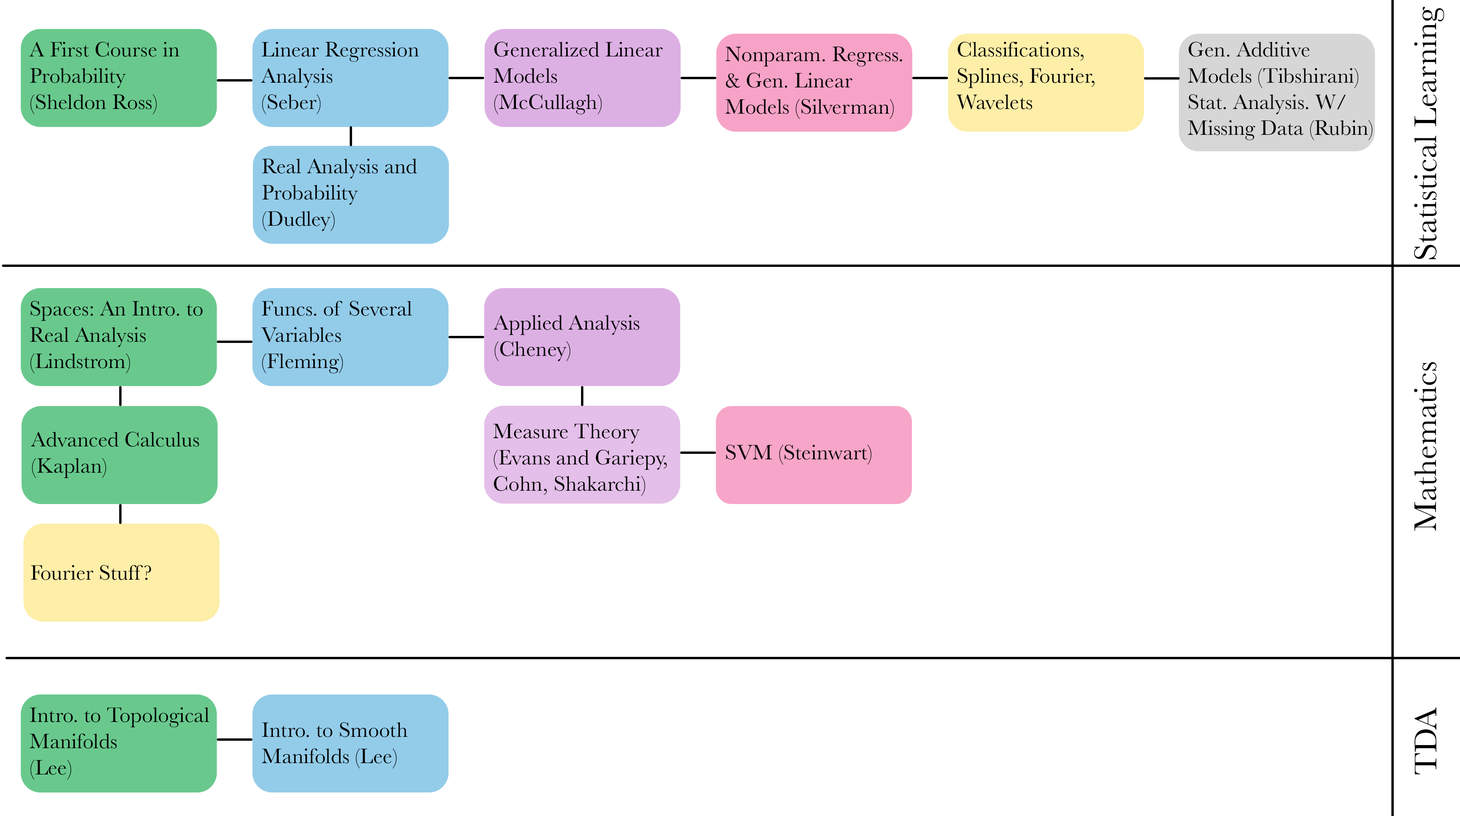
<style>
.page{position:relative;width:1460px;height:816px;background:#ffffff}
.page>*{position:absolute;margin:0}
.t1{font:32.7px "Baskerville";color:#000000}
.t2{font:21.8px "Baskerville";color:#000000}
</style>
<div class="page">
<p class="t1" style="left:1414px;top:7px;width:31px;height:253px;rotate:-90deg">Statistical Learning</p>
<p class="t2" style="left:29px;top:42px;width:151px;height:73px">A First Course in <br>Probability <br>(Sheldon Ross)</p>
<p class="t2" style="left:261px;top:42px;width:158px;height:73px">Linear Regression <br>Analysis<br>(Seber)</p>
<p class="t2" style="left:494px;top:42px;width:169px;height:73px">Generalized Linear <br>Models <br>(McCullagh)</p>
<p class="t2" style="left:957px;top:42px;width:138px;height:67px">Classifications,<br>Splines, Fourier,<br>Wavelets</p>
<p class="t2" style="left:1188px;top:42px;width:185px;height:98px">Gen. Additive <br>Models (Tibshirani)<br>Stat. Analysis. W/<br>Missing Data (Rubin)</p>
<p class="t2" style="left:726px;top:46px;width:176px;height:73px">Nonparam. Regress. <br>&amp; Gen. Linear<br>Models (Silverman)</p>
<p class="t2" style="left:262px;top:158px;width:155px;height:73px">Real Analysis and <br>Probability<br>(Dudley)</p>
<p class="t2" style="left:30px;top:301px;width:173px;height:73px">Spaces: An Intro. to <br>Real Analysis<br>(Lindstrom)</p>
<p class="t2" style="left:261px;top:301px;width:151px;height:73px">Funcs. of Several<br>Variables<br>(Fleming)</p>
<p class="t2" style="left:494px;top:315px;width:146px;height:47px">Applied Analysis<br>(Cheney)</p>
<p class="t1" style="left:1414px;top:362px;width:23px;height:169px;rotate:-90deg">Mathematics</p>
<p class="t2" style="left:493px;top:424px;width:174px;height:72px">Measure Theory<br>(Evans and Gariepy,  <br>Cohn, Shakarchi)</p>
<p class="t2" style="left:31px;top:432px;width:168px;height:46px">Advanced Calculus<br>(Kaplan)</p>
<p class="t2" style="left:726px;top:445px;width:146px;height:20px">SVM (Steinwart)</p>
<p class="t2" style="left:31px;top:565px;width:120px;height:15px">Fourier Stuff?</p>
<p class="t2" style="left:30px;top:707px;width:179px;height:73px">Intro. to Topological <br>Manifolds <br>(Lee)</p>
<p class="t1" style="left:1415px;top:708px;width:22px;height:67px;rotate:-90deg">TDA</p>
<p class="t2" style="left:262px;top:722px;width:146px;height:47px">Intro. to Smooth <br>Manifolds (Lee)</p>
</div>
